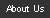
<style>
.page{position:relative;width:50px;height:18px;background:#333333}
.page>*{position:absolute;margin:0}
.t1{font:9px "ArialMT";color:#ffffff}
</style>
<div class="page">
<p class="t1" style="left:6px;top:5px;width:38px;height:7px">About Us</p>
</div>
